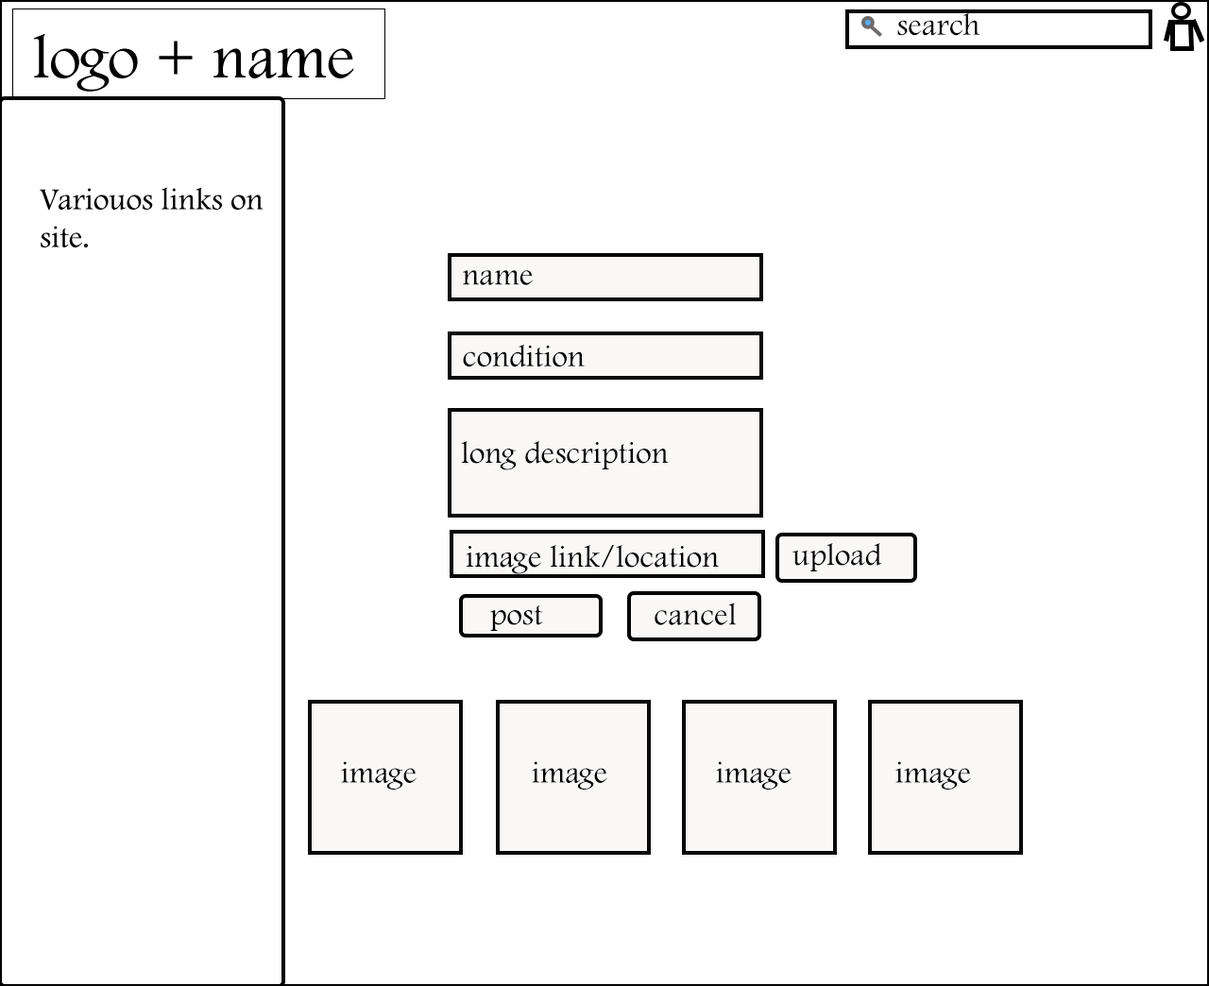
<style>
.page{position:relative;width:1209px;height:986px;background:#ffffff}
.page>*{position:absolute;margin:0}
.t1{font:31.5px "FootlightMTLight";color:#000000}
</style>
<div class="page">
<p class="t1" style="left:897px;top:12px;width:83px;height:24px">search</p>
<p class="t1" style="left:463px;top:270px;width:70px;height:15px">name</p>
<p class="t1" style="left:463px;top:344px;width:122px;height:23px">condition</p>
<p class="t1" style="left:461px;top:441px;width:208px;height:29px">long description</p>
<p class="t1" style="left:466px;top:545px;width:253px;height:29px">image link/location</p>
<p class="t1" style="left:793px;top:543px;width:89px;height:29px">upload</p>
<p class="t1" style="left:490px;top:606px;width:53px;height:25px">post</p>
<p class="t1" style="left:655px;top:603px;width:82px;height:22px">cancel</p>
<p class="t1" style="left:341px;top:761px;width:76px;height:29px">image</p>
<p class="t1" style="left:532px;top:761px;width:75px;height:29px">image</p>
<p class="t1" style="left:716px;top:761px;width:76px;height:29px">image</p>
<p class="t1" style="left:896px;top:761px;width:75px;height:29px">image</p>
</div>
